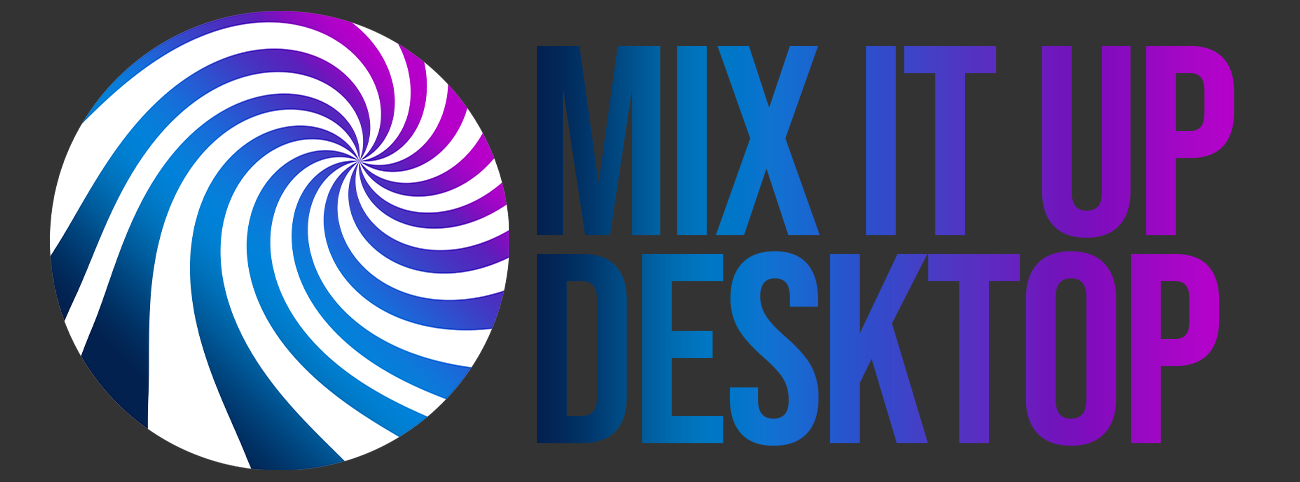
<style>
.page{position:relative;width:1300px;height:482px;background:#333333}
.page>*{position:absolute;margin:0}
.t1{font:270px "BebasNeue-Regular";letter-spacing:-0.02em}
</style>
<div class="page">
<p class="t1" style="left:537px;top:46px;width:698px;height:192px">Mix It Up</p>
<p class="t1" style="left:537px;top:251px;width:683px;height:195px">Desktop</p>
</div>
